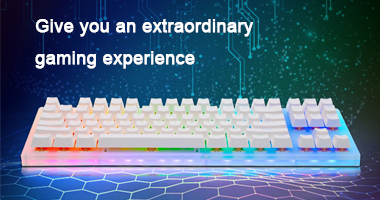
<style>
.page{position:relative;width:380px;height:200px}
.page>*{position:absolute;margin:0}
.t1{font:18px "ArialMT";color:#ffffff;font-weight:bold}
</style>
<div class="page">
<p class="t1" style="left:35px;top:19px;width:218px;height:50px">Give you an extraordinary <br>gaming experience</p>
</div>
